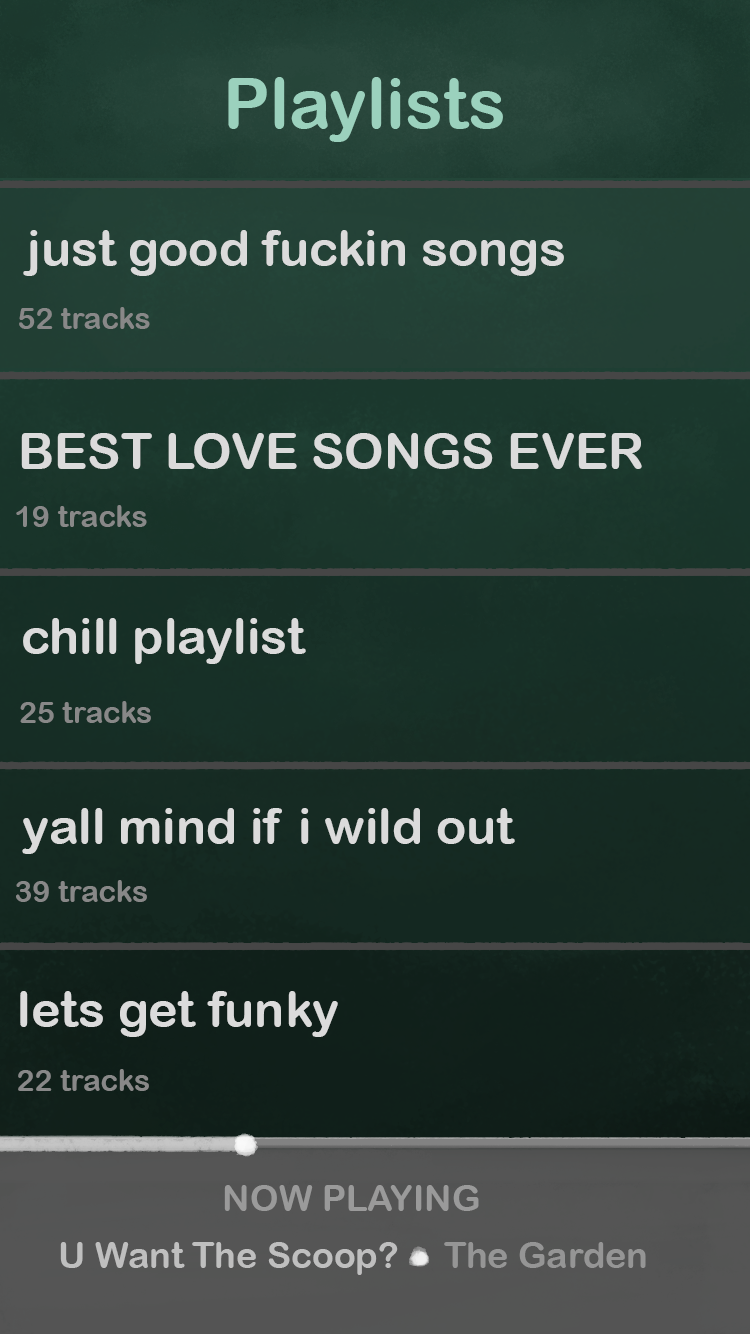
<style>
.page{position:relative;width:750px;height:1334px}
.page>*{position:absolute;margin:0}
.t1{font:70px "ArialRoundedMTBold";color:#9bd1bd}
.t2{font:50px "ArialRoundedMTBold";color:#dbdbdb}
.t3{font:30px "ArialRoundedMTBold";color:#888888}
</style>
<div class="page">
<p class="t1" style="left:228px;top:77px;width:275px;height:65px">Playlists</p>
<p class="t2" style="left:23px;top:230px;width:541px;height:46px">just good fuckin songs</p>
<p class="t3" style="left:19px;top:307px;width:131px;height:22px">52 tracks</p>
<p class="t2" style="left:21px;top:433px;width:621px;height:36px">BEST LOVE SONGS EVER</p>
<p class="t3" style="left:16px;top:505px;width:131px;height:22px">19 tracks</p>
<p class="t2" style="left:23px;top:618px;width:283px;height:46px">chill playlist</p>
<p class="t3" style="left:20px;top:701px;width:131px;height:22px">25 tracks</p>
<p class="t2" style="left:22px;top:808px;width:493px;height:46px">yall mind if i wild out</p>
<p class="t3" style="left:16px;top:880px;width:131px;height:22px">39 tracks</p>
<p class="t2" style="left:20px;top:991px;width:318px;height:46px">lets get funky</p>
<p class="t3" style="left:18px;top:1069px;width:131px;height:22px">22 tracks</p>
</div>
